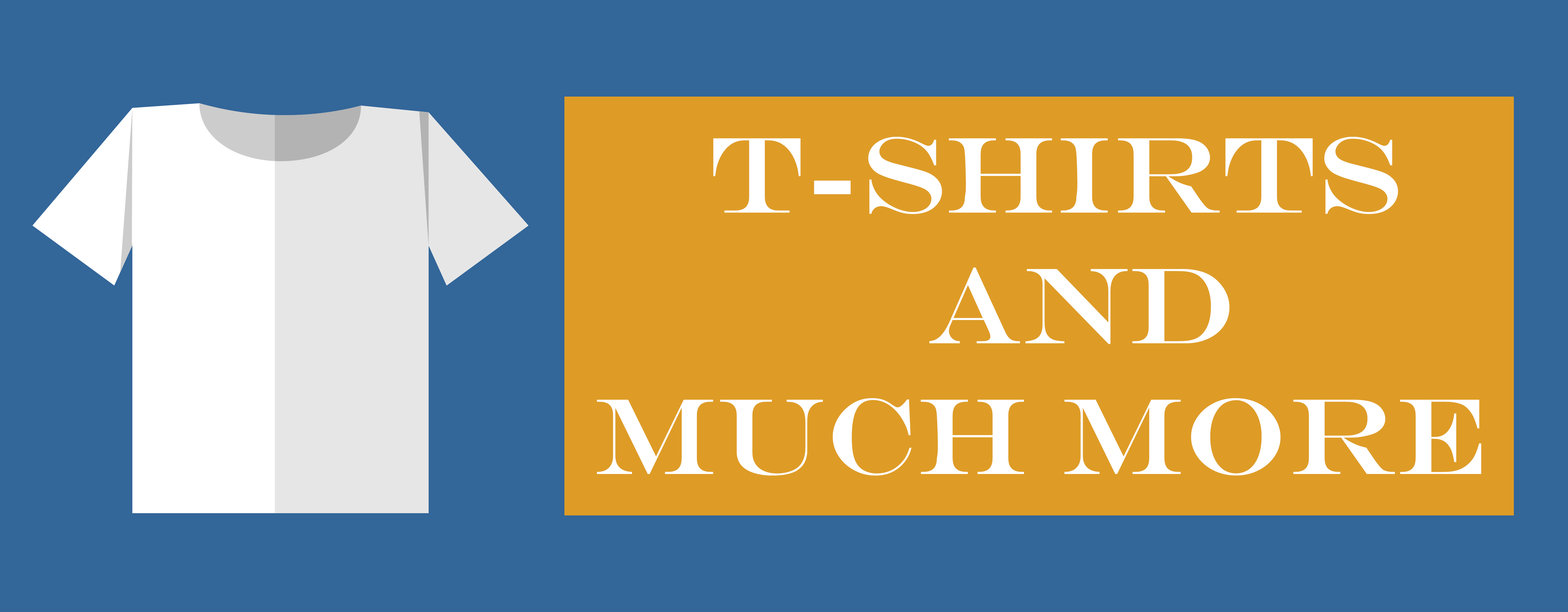
<style>
.page{position:relative;width:1568px;height:612px;background:#336699}
.page>*{position:absolute;margin:0}
.t1{font:108.9px "EngraversMT";color:#ffffff}
</style>
<div class="page">
<p class="t1" style="left:597px;top:137px;width:884px;height:338px">T-Shirts <br>                             and <br>Much More</p>
</div>
